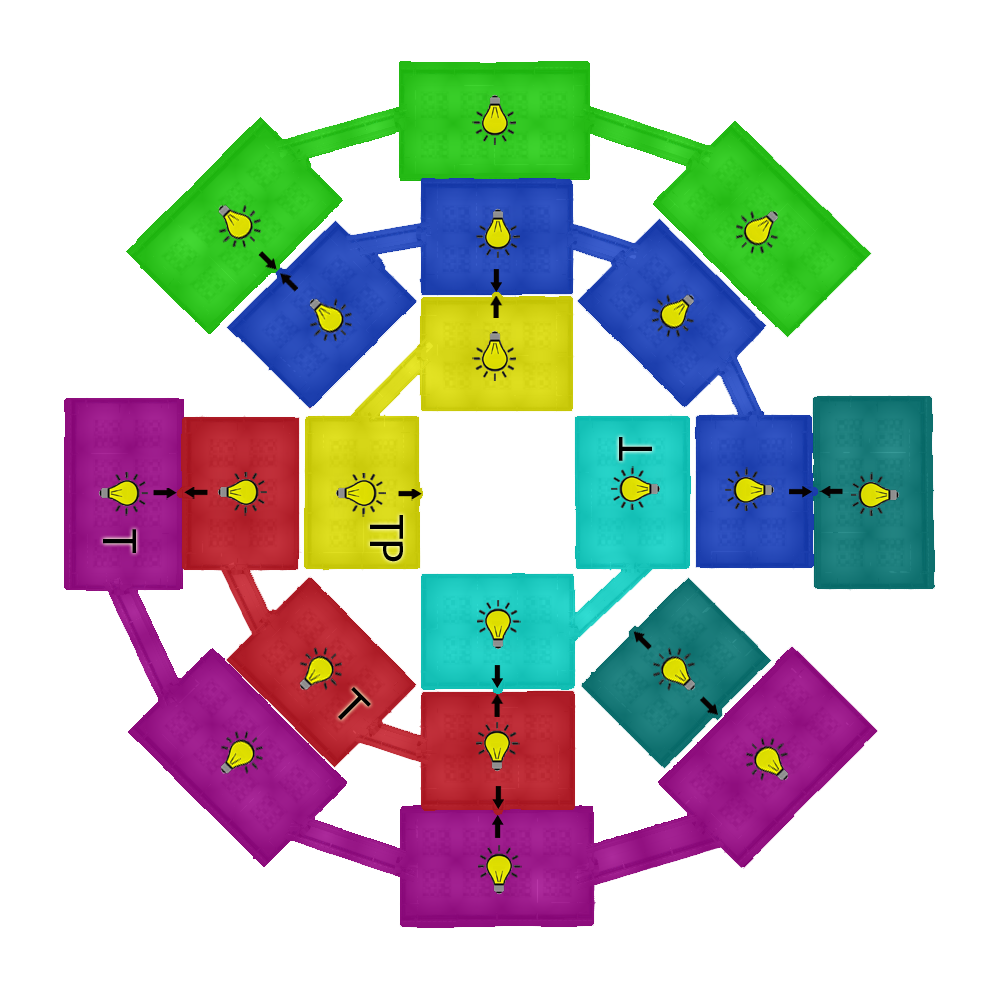
<style>
.page{position:relative;width:1000px;height:1000px;background:#ffffff}
.page>*{position:absolute;margin:0}
.t1{font:48px "MyriadPro-Regular";color:#000000}
</style>
<div class="page">
<p class="t1" style="left:619px;top:437px;width:33px;height:24px;rotate:-90deg">T</p>
<p class="t1" style="left:370px;top:515px;width:33px;height:47px;rotate:90deg">TP</p>
<p class="t1" style="left:103px;top:529px;width:33px;height:24px;rotate:90deg">T</p>
<p class="t1" style="left:338px;top:687px;width:33px;height:33px;rotate:45deg">T</p>
</div>
